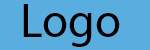
<style>
.page{position:relative;width:150px;height:50px;background:#59addf}
.page>*{position:absolute;margin:0}
.t1{font:48px "MyriadPro-Regular";color:#000000}
</style>
<div class="page">
<p class="t1" style="left:23px;top:4px;width:97px;height:43px">Logo</p>
</div>
